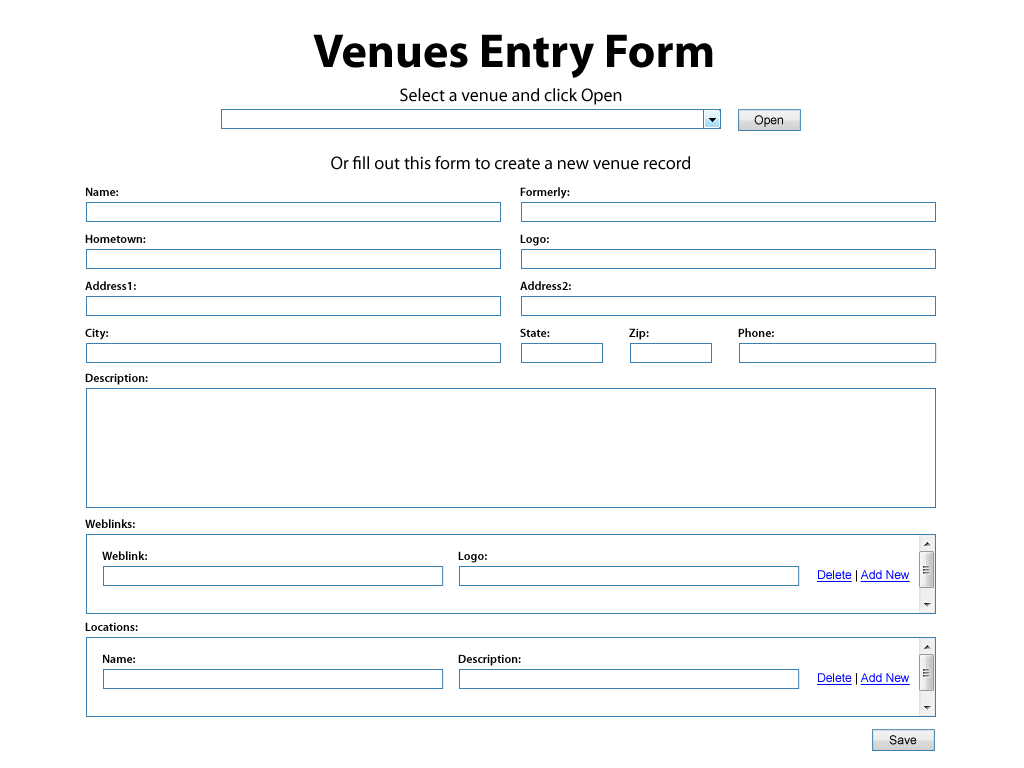
<style>
.page{position:relative;width:1024px;height:768px;background:#ffffff}
.page>*{position:absolute;margin:0}
.t1{font:48px "MyriadPro-Bold";color:#000000}
.t2{font:18px "MyriadPro-Regular";color:#000000}
.t3{font:12px "ArialMT";color:#000000}
.t4{font:12px "MyriadPro-Semibold";color:#000000}
.t5{font:12px "ArialMT";color:#0000ff;text-decoration:underline}
</style>
<div class="page">
<p class="t1" style="left:313px;top:34px;width:400px;height:44px">Venues Entry Form</p>
<p class="t2" style="left:400px;top:88px;width:222px;height:17px">Select a venue and click Open</p>
<p class="t3" style="left:754px;top:115px;width:29px;height:12px">Open</p>
<p class="t2" style="left:331px;top:156px;width:359px;height:14px">Or fill out this form to create a new venue record</p>
<p class="t4" style="left:86px;top:187px;width:32px;height:9px">Name:</p>
<p class="t4" style="left:520px;top:187px;width:50px;height:12px">Formerly:</p>
<p class="t4" style="left:85px;top:234px;width:61px;height:9px">Hometown:</p>
<p class="t4" style="left:520px;top:234px;width:29px;height:12px">Logo:</p>
<p class="t4" style="left:85px;top:281px;width:51px;height:9px">Address1:</p>
<p class="t4" style="left:520px;top:281px;width:51px;height:9px">Address2:</p>
<p class="t4" style="left:85px;top:328px;width:23px;height:12px">City:</p>
<p class="t4" style="left:520px;top:328px;width:30px;height:9px">State:</p>
<p class="t4" style="left:629px;top:328px;width:20px;height:12px">Zip:</p>
<p class="t4" style="left:738px;top:328px;width:36px;height:9px">Phone:</p>
<p class="t4" style="left:85px;top:373px;width:63px;height:12px">Description:</p>
<p class="t4" style="left:85px;top:519px;width:50px;height:9px">Weblinks:</p>
<p class="t4" style="left:102px;top:551px;width:45px;height:9px">Weblink:</p>
<p class="t4" style="left:458px;top:551px;width:29px;height:12px">Logo:</p>
<p class="t5" style="left:817px;top:570px;width:93px;height:12px">Delete<span class="t3"> | </span>Add New</p>
<p class="t4" style="left:85px;top:622px;width:53px;height:9px">Locations:</p>
<p class="t4" style="left:103px;top:654px;width:32px;height:9px">Name:</p>
<p class="t4" style="left:458px;top:654px;width:63px;height:12px">Description:</p>
<p class="t5" style="left:817px;top:673px;width:93px;height:12px">Delete<span class="t3"> | </span>Add New</p>
<p class="t3" style="left:889px;top:735px;width:28px;height:10px">Save</p>
</div>
